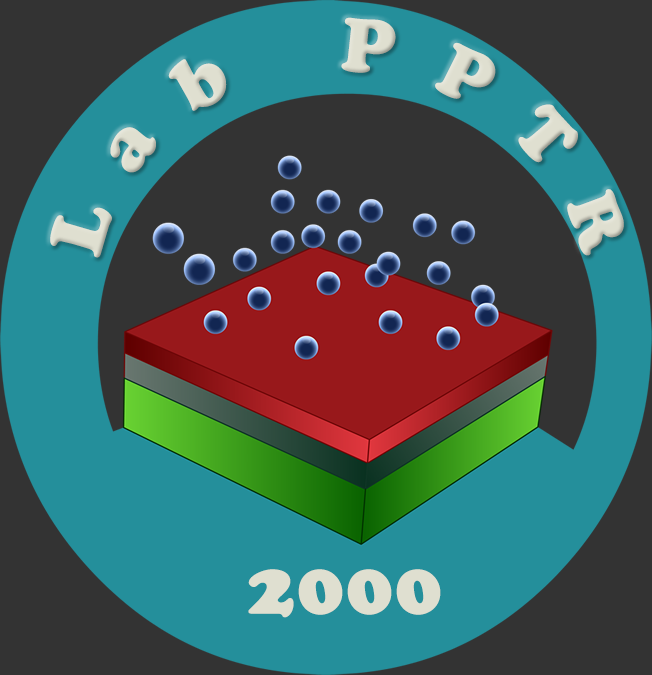
<style>
.page{position:relative;width:652px;height:675px;background:#333333}
.page>*{position:absolute;margin:0}
.t1{font:75px/90px "CooperBlackStd";letter-spacing:0.6em;color:#dfdfd0}
.t2{font:73px/90px "CooperBlackStd";letter-spacing:0.6em;color:#dfdfd0}
.t3{font:71px/90px "CooperBlackStd";letter-spacing:0.6em;color:#dfdfd0}
.t4{font:69px/90px "CooperBlackStd";letter-spacing:0.6em;color:#dfdfd0}
.t5{font:75px "CooperBlackStd";letter-spacing:0.025em;color:#dfdfd0}
</style>
<div class="page">
<p class="t1" style="left:50px;top:17px;width:574px;height:241px">Lab P<span class="t2">P</span><span class="t3">T</span><span class="t4">R</span></p>
<p class="t5" style="left:248px;top:569px;width:193px;height:49px">2000</p>
</div>
